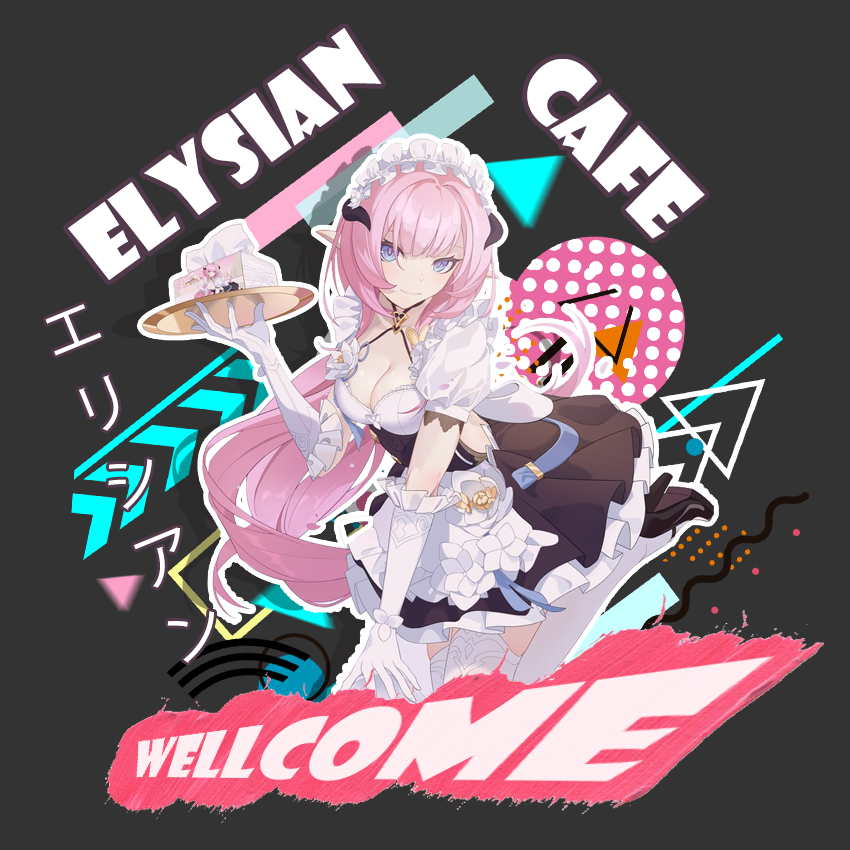
<style>
.page{position:relative;width:850px;height:850px;background:#333333}
.page>*{position:absolute;margin:0}
.t1{font:87.8px "ShowcardGothic-Reg";color:#ffffff}
.t2{font:90.1px "ShowcardGothic-Reg";color:#ffffff}
.t3{font:59.3px/41.2px "KozGoPr6N-Regular";color:#ffffff}
</style>
<div class="page">
<p class="t1" style="left:68px;top:28px;width:314px;height:252px;rotate:-36deg">elysian</p>
<p class="t2" style="left:527px;top:59px;width:178px;height:180px;rotate:47deg">cafe</p>
<p class="t3" style="left:45px;top:304px;width:169px;height:359px;text-align:center;rotate:-22deg">エ<br><br>リ<br><br>シ<br><br>ア<br><br>ン</p>
</div>
